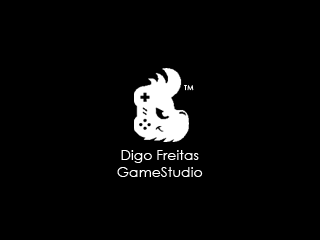
<style>
.page{position:relative;width:320px;height:240px;background:#000000}
.page>*{position:absolute;margin:0}
.t1{font:6.7px "CenturyGothic";color:#ffffff}
.t2{font:14px "CenturyGothic";color:#ffffff}
</style>
<div class="page">
<p class="t1" style="left:184px;top:85px;width:10px;height:6px">TM</p>
<p class="t2" style="left:117px;top:150px;width:86px;height:27px;text-align:center">Digo Freitas <br>GameStudio</p>
</div>
